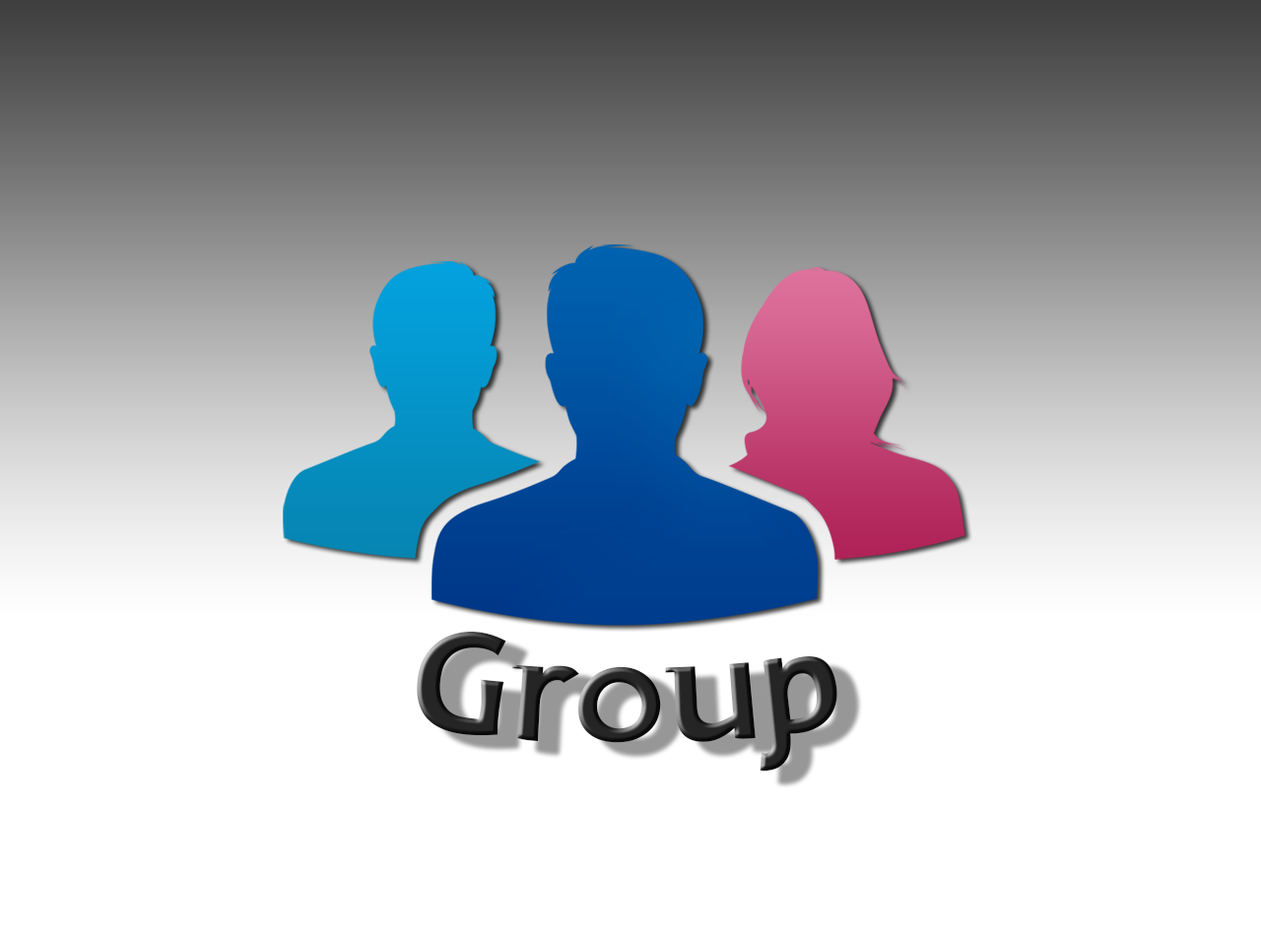
<style>
.page{position:relative;width:1261px;height:946px;background:#ffffff}
.page>*{position:absolute;margin:0}
.t1{font:147.8px "KakawateFont";color:#252525}
</style>
<div class="page">
<p class="t1" style="left:417px;top:631px;width:420px;height:140px">Group</p>
</div>
